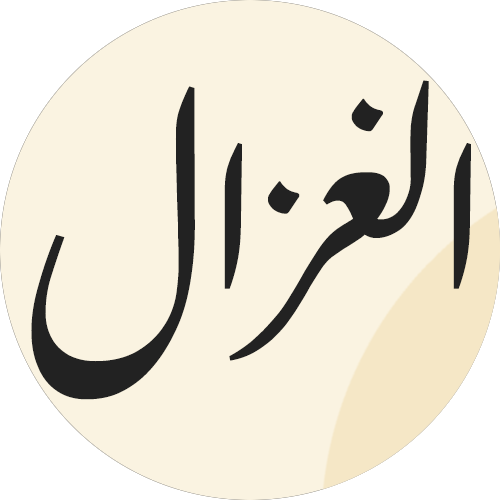
<style>
.page{position:relative;width:500px;height:500px;background:#faf3e1}
.page>*{position:absolute;margin:0}
.t1{font:250px "KAF-GULZAR-!";color:#222222}
</style>
<div class="page">
<p class="t1" style="left:31px;top:80px;width:440px;height:320px">الغزال</p>
</div>
